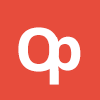
<style>
.page{position:relative;width:100px;height:100px;background:#e74c3c}
.page>*{position:absolute;margin:0}
.t1{font:60px "OpenSans-Bold";color:#ffffff}
</style>
<div class="page">
<p class="t1" style="left:18px;top:27px;width:41px;height:45px">O</p>
<p class="t1" style="left:49px;top:36px;width:32px;height:49px">p</p>
</div>
